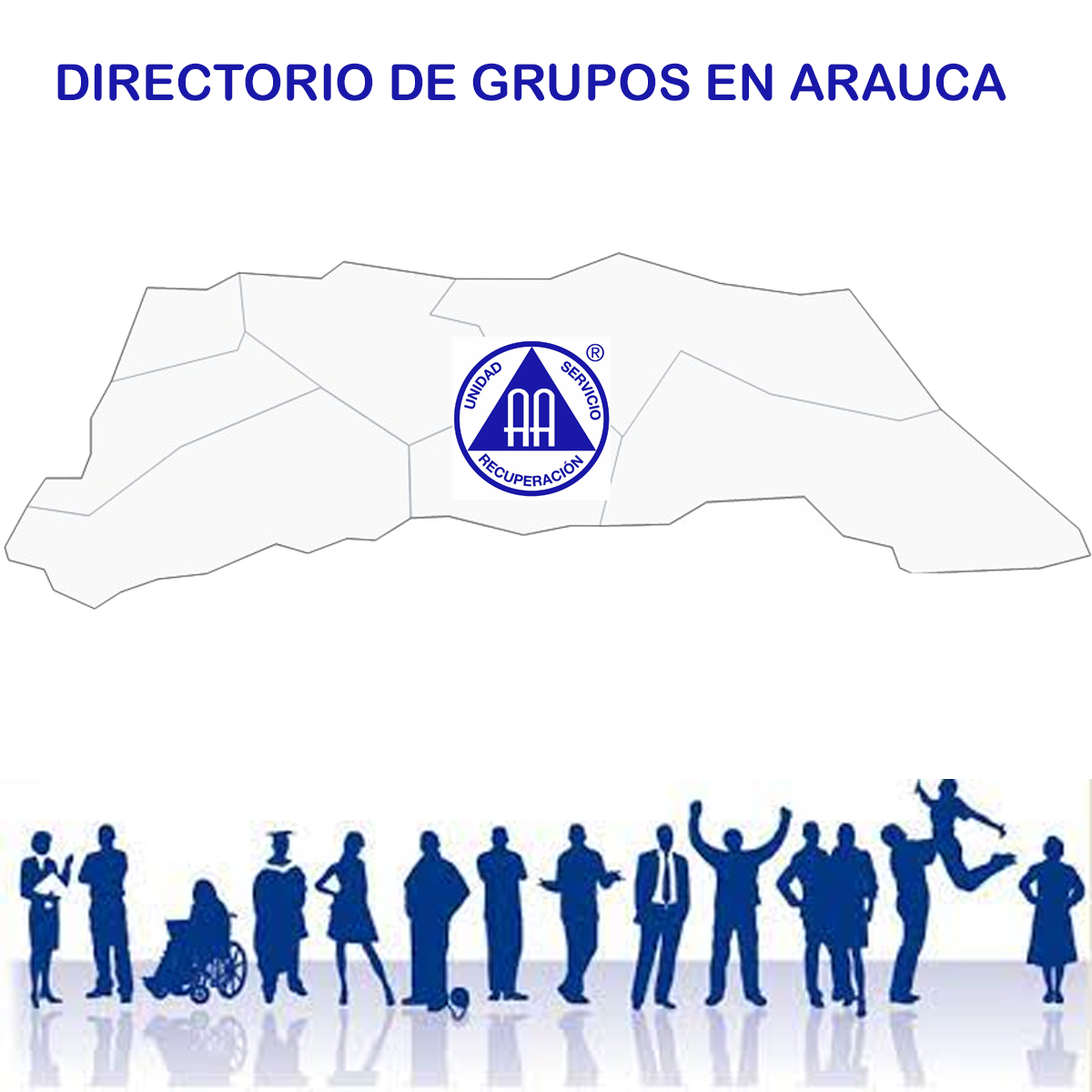
<style>
.page{position:relative;width:1092px;height:1092px;background:#ffffff}
.page>*{position:absolute;margin:0}
.t1{font:50.2px "ArialRoundedMTBold";color:#1a18a9}
</style>
<div class="page">
<p class="t1" style="left:57px;top:63px;width:949px;height:38px">DIRECTORIO DE GRUPOS EN ARAUCA</p>
</div>
